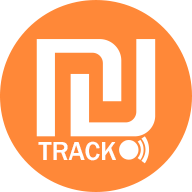
<style>
.page{position:relative;width:192px;height:192px;background:#ff8838}
.page>*{position:absolute;margin:0}
.t1{font:26.9px "FranklinGothic-Medium";color:#ffffff}
</style>
<div class="page">
<p class="t1" style="left:38px;top:141px;width:78px;height:20px">TRACK</p>
</div>
